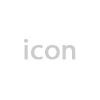
<style>
.page{position:relative;width:100px;height:100px;background:#ffffff}
.page>*{position:absolute;margin:0}
.t1{font:29.2px "MyriadPro-Regular";color:#cccccc;font-weight:bold}
</style>
<div class="page">
<p class="t1" style="left:24px;top:39px;width:52px;height:21px">icon</p>
</div>
